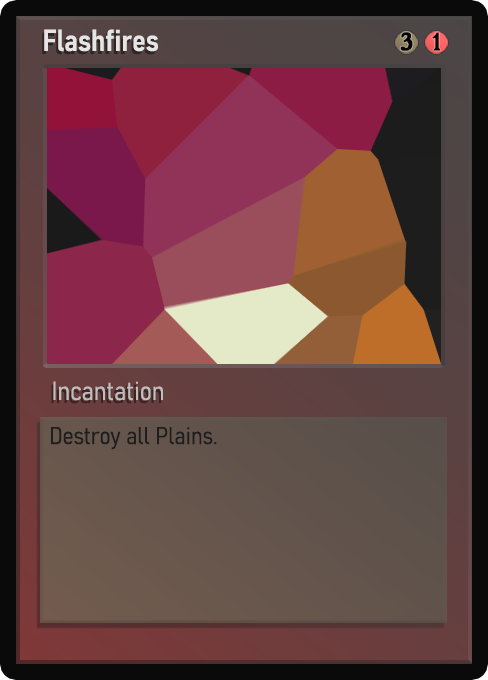
<style>
.page{position:relative;width:488px;height:680px}
.page>*{position:absolute;margin:0}
.t1{font:30px "Bahnschrift-SemiBoldSemiCondensed";color:#f2f2f2;font-weight:bold}
.t2{font:25px "WTRRoycroft";color:#000000;font-weight:bold;scale:1.09 1}
.t3{font:26px "Bahnschrift-LightSemiCondensed";color:#c8c8c8;font-weight:bold}
.t4{font:24px "Bahnschrift-LightSemiCondensed";color:#1e1e1e;font-weight:bold}
</style>
<div class="page">
<p class="t1" style="left:44px;top:29px;width:114px;height:23px;opacity:0.9">Flashfires</p>
<p class="t2" style="left:400px;top:32px;width:13px;height:19px">3</p>
<p class="t2" style="left:432px;top:32px;width:9px;height:19px">1</p>
<p class="t3" style="left:53px;top:381px;width:110px;height:20px;opacity:0.9">Incantation</p>
<p class="t4" style="left:51px;top:427px;width:166px;height:23px">Destroy all Plains.</p>
</div>
